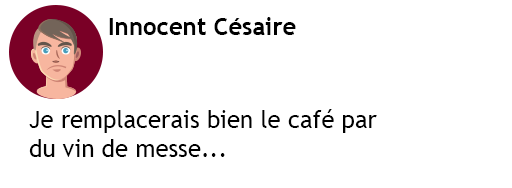
<style>
.page{position:relative;width:512px;height:188px;background:#ffffff}
.page>*{position:absolute;margin:0}
.t1{font:24px "TrebuchetMS-Bold";color:#000000}
.t2{font:24px "TrebuchetMS";color:#000000}
</style>
<div class="page">
<p class="t1" style="left:109px;top:17px;width:187px;height:18px">Innocent Césaire</p>
<p class="t2" style="left:29px;top:109px;width:348px;height:48px">Je remplacerais bien le café par <br>du vin de messe...</p>
</div>
